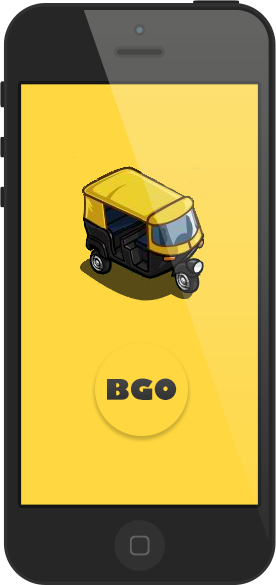
<style>
.page{position:relative;width:276px;height:585px;background:#ffd740}
.page>*{position:absolute;margin:0}
.t1{font:28px "GillSans-UltraBold";color:#3c3c3c}
</style>
<div class="page">
<p class="t1" style="left:107px;top:378px;width:70px;height:22px">BGO</p>
</div>
